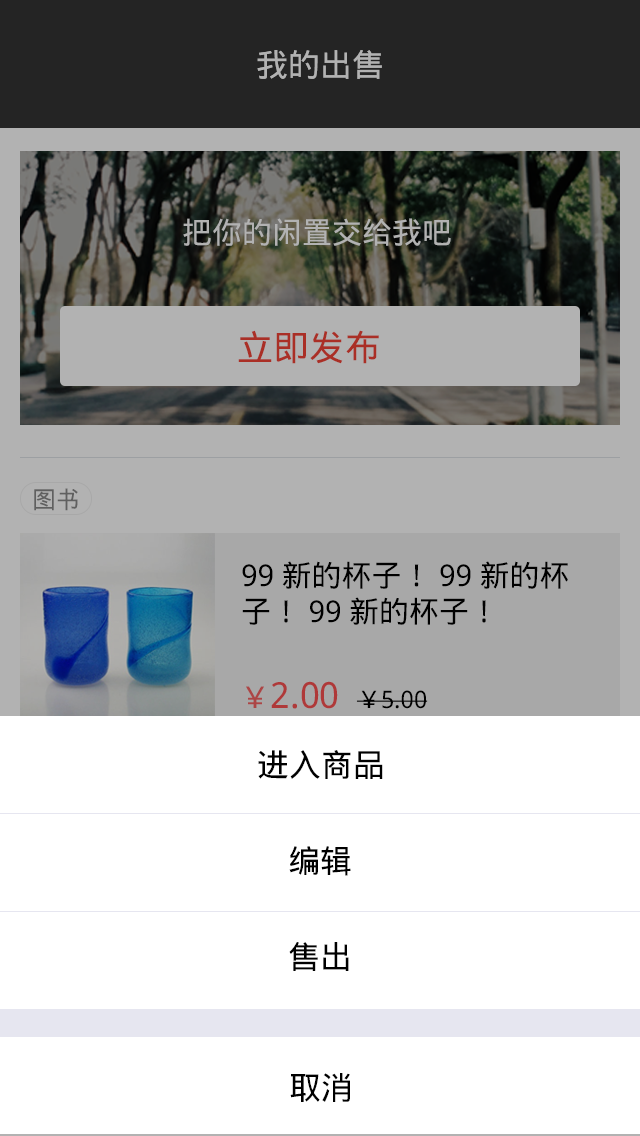
<style>
.page{position:relative;width:640px;height:1136px;background:#ffffff}
.page>*{position:absolute;margin:0}
.t1{font:32px "DroidSansFallback";color:#b2b2b2}
.t2{font:30px "DroidSansFallback";color:#b2b2b2}
.t3{font:36px "DroidSansFallback";color:#aa2f26}
.t4{font:24px "DroidSansFallback";color:#606060}
.t5{font:30px "DroidSansFallback";color:#000000}
.t6{font:36px "DroidSansFallback";color:#af3939}
.t7{font:30px "DroidSansFallback";color:#af3939}
.t8{font:24px "DroidSansFallback";color:#000000}
.t9{font:32px "DroidSansFallback";color:#000000}
</style>
<div class="page">
<p class="t1" style="left:257px;top:50px;width:125px;height:29px">我的出售</p>
<p class="t2" style="left:183px;top:218px;width:268px;height:28px">把你的闲置交给我吧</p>
<p class="t3" style="left:238px;top:330px;width:141px;height:34px">立即发布</p>
<p class="t4" style="left:34px;top:488px;width:44px;height:23px">图书</p>
<p class="t5" style="left:242px;top:561px;width:326px;height:64px">99新的杯子！99新的杯<br>子！99新的杯子！</p>
<p class="t6" style="left:246px;top:681px;width:92px;height:28px"><span class="t7">￥</span>2.00</p>
<p class="t8" style="left:356px;top:690px;width:72px;height:19px">￥5.00</p>
<p class="t9" style="left:258px;top:750px;width:125px;height:29px">进入商品</p>
<p class="t9" style="left:289px;top:846px;width:62px;height:30px">编辑</p>
<p class="t9" style="left:289px;top:942px;width:60px;height:29px">售出</p>
<p class="t9" style="left:290px;top:1073px;width:60px;height:29px">取消</p>
</div>
